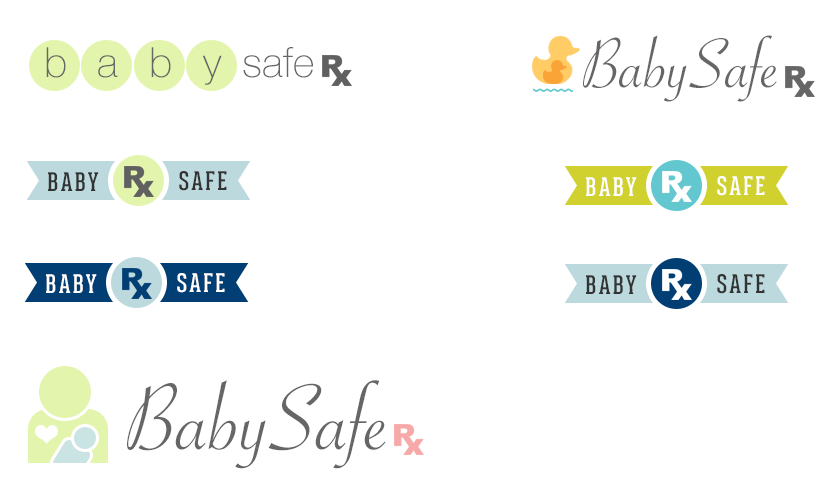
<style>
.page{position:relative;width:838px;height:500px;background:#ffffff}
.page>*{position:absolute;margin:0}
.t1{font:75px "SavoyeLetPlain";color:#666666}
.t2{font:41.4px "HelveticaNeue-Thin";letter-spacing:0.75em;color:#666666}
.t3{font:41.4px "HelveticaNeue-Thin";color:#666666}
.t4{font:25px "GearedSlab-Regular";letter-spacing:0.1em;color:#ffffff;text-transform:uppercase}
.t5{font:25px "GearedSlab-Regular";letter-spacing:0.1em;color:#333333;text-transform:uppercase}
.t6{font:100px "SavoyeLetPlain";color:#666666}
</style>
<div class="page">
<p class="t1" style="left:583px;top:35px;width:194px;height:67px">BabySafe</p>
<p class="t2" style="left:46px;top:47px;width:176px;height:38px">baby</p>
<p class="t3" style="left:243px;top:47px;width:70px;height:31px">safe</p>
<p class="t4" style="left:586px;top:177px;width:51px;height:19px">BABY</p>
<p class="t4" style="left:717px;top:176px;width:48px;height:20px">SAFE</p>
<p class="t5" style="left:586px;top:275px;width:51px;height:19px">BABY</p>
<p class="t5" style="left:717px;top:274px;width:48px;height:20px">SAFE</p>
<p class="t6" style="left:127px;top:380px;width:259px;height:89px">BabySafe</p>
</div>
